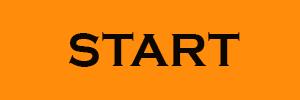
<style>
.page{position:relative;width:300px;height:100px;background:#ff8c0a}
.page>*{position:absolute;margin:0}
.t1{font:48.8px "CopperplateGothic-Bold";color:#0c0701}
</style>
<div class="page">
<p class="t1" style="left:69px;top:32px;width:171px;height:35px">START</p>
</div>
